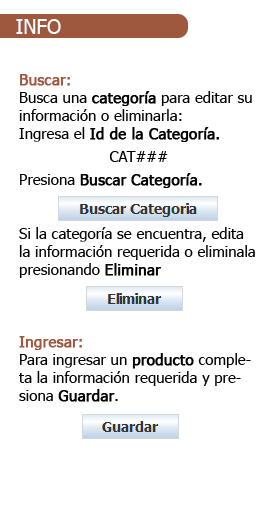
<style>
.page{position:relative;width:276px;height:505px;background:#ffffff}
.page>*{position:absolute;margin:0}
.t1{font:20px "Tahoma";color:#fcfbfb}
.t2{font:15px "Tahoma";color:#040000}
.t3{font:15px "Tahoma";color:#9e583d;font-weight:bold}
.t4{font:15px "Tahoma";color:#040000;font-weight:bold}
</style>
<div class="page">
<p class="t1" style="left:16px;top:19px;width:45px;height:15px">INFO</p>
<p class="t2" style="left:19px;top:74px;width:236px;height:328px"><span class="t3">Buscar:<br></span>Busca una <span class="t4">categoría</span> para editar su información o eliminarla:<br>Ingresa el <span class="t4">Id de la Categoría.<br></span>CAT###<br>Presiona <span class="t4">Buscar Categoría.<br></span><br><br>Si la categoría se encuentra, edita la información requerida o eliminala presionando <span class="t4">Eliminar<br><br><br><br></span><span class="t3">Ingresar:<br></span>Para ingresar un <span class="t4">producto</span> completa la información requerida y presiona <span class="t4">Guardar</span>.</p>
</div>
